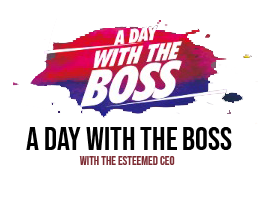
<style>
.page{position:relative;width:258px;height:200px;background:#ffffff}
.page>*{position:absolute;margin:0}
.t1{font:32.1px "BebasNeue-Regular";color:#000000}
.t2{font:12.7px "BebasNeue-Regular";color:#7c2b32}
</style>
<div class="page">
<p class="t1" style="left:26px;top:127px;width:206px;height:23px">A DAY WITH THE BOSS</p>
<p class="t2" style="left:79px;top:156px;width:96px;height:9px">WITH THE ESTEEMED CEO</p>
</div>
